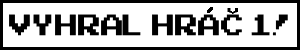
<style>
.page{position:relative;width:300px;height:50px;background:#ffffff}
.page>*{position:absolute;margin:0}
.t1{font:41.7px "ArcadeClassic";color:#000000}
.t2{font:12.5px "ArcadeClassic";color:#000000;scale:1.69 1}
</style>
<div class="page">
<p class="t1" style="left:9px;top:14px;width:279px;height:22px">Vyhral Hrac 1!</p>
<p class="t2" style="left:227px;top:8px;width:11px;height:6px">v</p>
</div>
